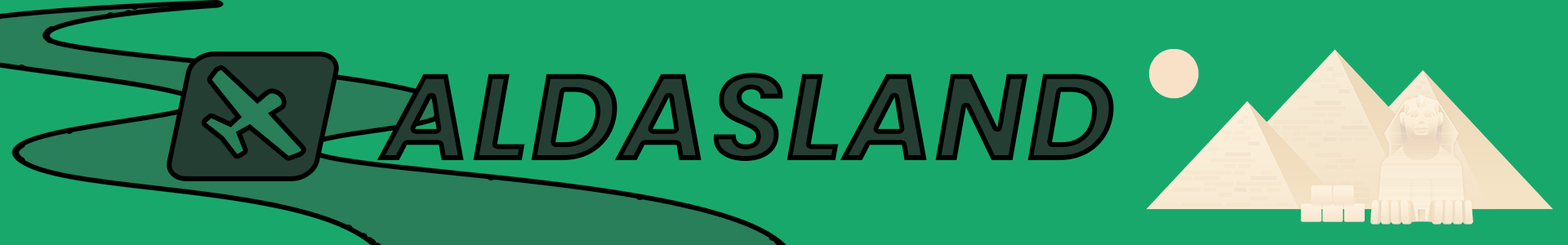
<style>
.page{position:relative;width:1568px;height:245px;background:#19a86c}
.page>*{position:absolute;margin:0}
.t1{font:122.5px "Poppins-BoldItalic"}
</style>
<div class="page">
<p class="t1" style="left:376px;top:73px;width:738px;height:89px">ALDASLAND</p>
</div>
